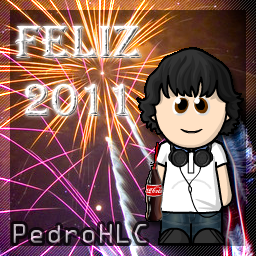
<style>
.page{position:relative;width:256px;height:256px}
.page>*{position:absolute;margin:0}
.t1{font:48px "Algerian"}
.t2{font:24px "OCRAStd"}
</style>
<div class="page">
<p class="t1" style="left:15px;top:26px;width:127px;height:90px;text-align:center">Feliz<br>2011</p>
<p class="t2" style="left:13px;top:224px;width:134px;height:19px">PedroHLC</p>
</div>
